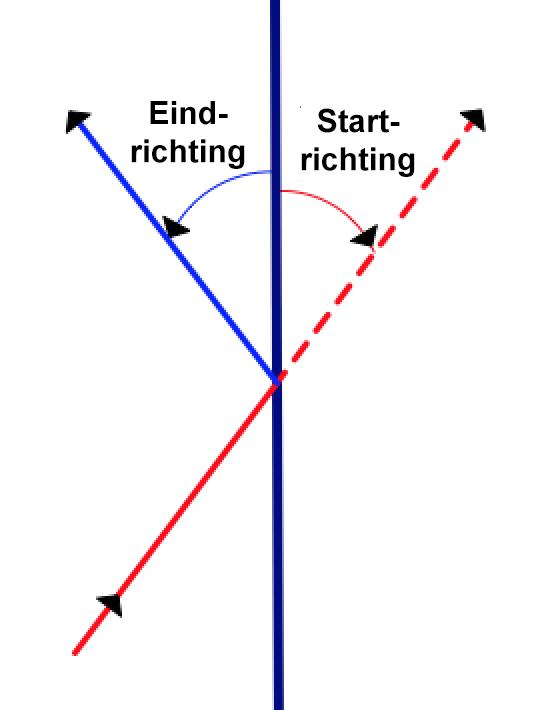
<style>
.page{position:relative;width:550px;height:710px;background:#ffffff}
.page>*{position:absolute;margin:0}
.t1{font:31.9px "Arial-BoldMT";color:#000000}
</style>
<div class="page">
<p class="t1" style="left:131px;top:101px;width:114px;height:68px;text-align:center">Eind-<br>richting</p>
<p class="t1" style="left:301px;top:108px;width:114px;height:69px;text-align:center">Start-<br>richting</p>
</div>
